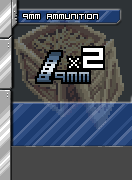
<style>
.page{position:relative;width:132px;height:180px}
.page>*{position:absolute;margin:0}
.t1{font:10px "VisitorTT1BRK";color:#ffffff}
</style>
<div class="page">
<p class="t1" style="left:23px;top:14px;width:75px;height:5px">9mm ammunition</p>
</div>
